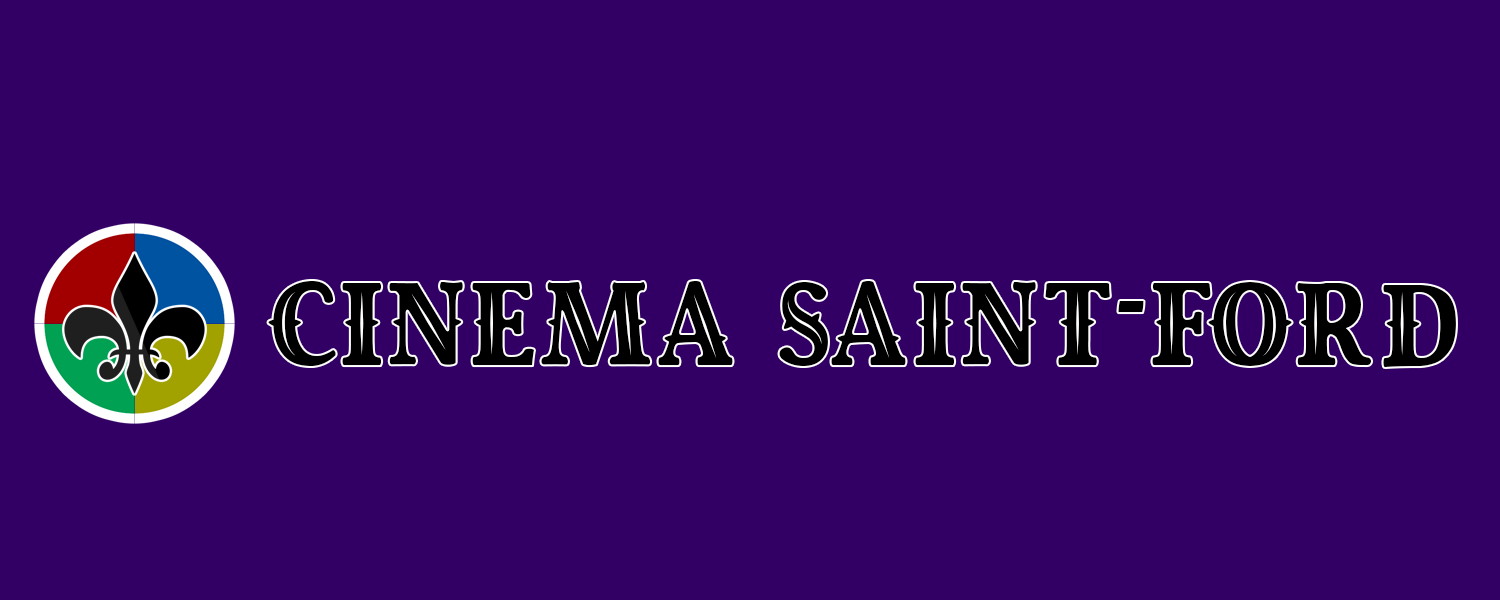
<style>
.page{position:relative;width:1500px;height:600px;background:#320064}
.page>*{position:absolute;margin:0}
.t1{font:150px "RoyalKingFree";color:#000000}
</style>
<div class="page">
<p class="t1" style="left:268px;top:281px;width:1188px;height:86px">cinema saint-ford</p>
</div>
